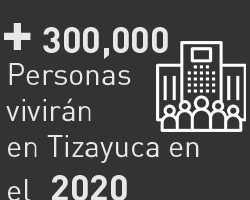
<style>
.page{position:relative;width:250px;height:200px;background:#333333}
.page>*{position:absolute;margin:0}
.t1{font:36px "DINPro-Bold";color:#e8e8e8}
.t2{font:60px "DINPro-Bold";color:#e8e8e8}
.t3{font:30px "DINPro";color:#e8e8e8}
</style>
<div class="page">
<p class="t1" style="left:4px;top:23px;width:164px;height:36px"><span class="t2">+</span> 300,000</p>
<p class="t3" style="left:6px;top:63px;width:193px;height:138px">Personas vivirán <br>en Tizayuca en el   <span class="t1">2020</span></p>
</div>
